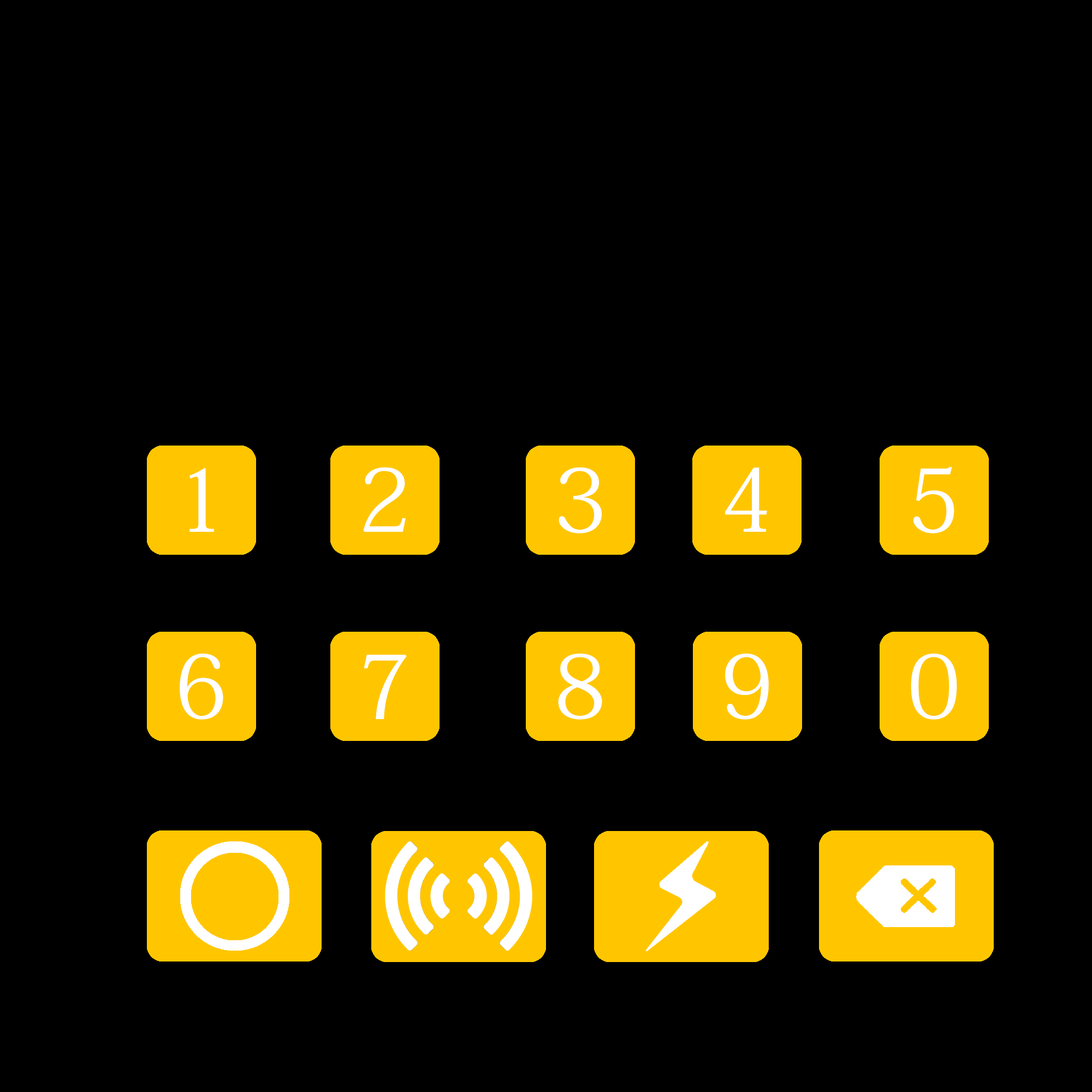
<style>
.page{position:relative;width:1092px;height:1092px;background:#000000}
.page>*{position:absolute;margin:0}
.t1{font:87.4px "AdobeKaitiStd-Regular";color:#ffffff}
</style>
<div class="page">
<p class="t1" style="left:189px;top:468px;width:25px;height:64px">1</p>
<p class="t1" style="left:363px;top:467px;width:43px;height:65px">2</p>
<p class="t1" style="left:559px;top:467px;width:43px;height:66px">3</p>
<p class="t1" style="left:725px;top:467px;width:42px;height:65px">4</p>
<p class="t1" style="left:913px;top:467px;width:41px;height:66px">5</p>
<p class="t1" style="left:180px;top:654px;width:43px;height:66px">6</p>
<p class="t1" style="left:558px;top:654px;width:44px;height:66px">8</p>
<p class="t1" style="left:725px;top:654px;width:44px;height:66px">9</p>
<p class="t1" style="left:911px;top:654px;width:46px;height:66px">0</p>
<p class="t1" style="left:364px;top:655px;width:43px;height:64px">7</p>
</div>
